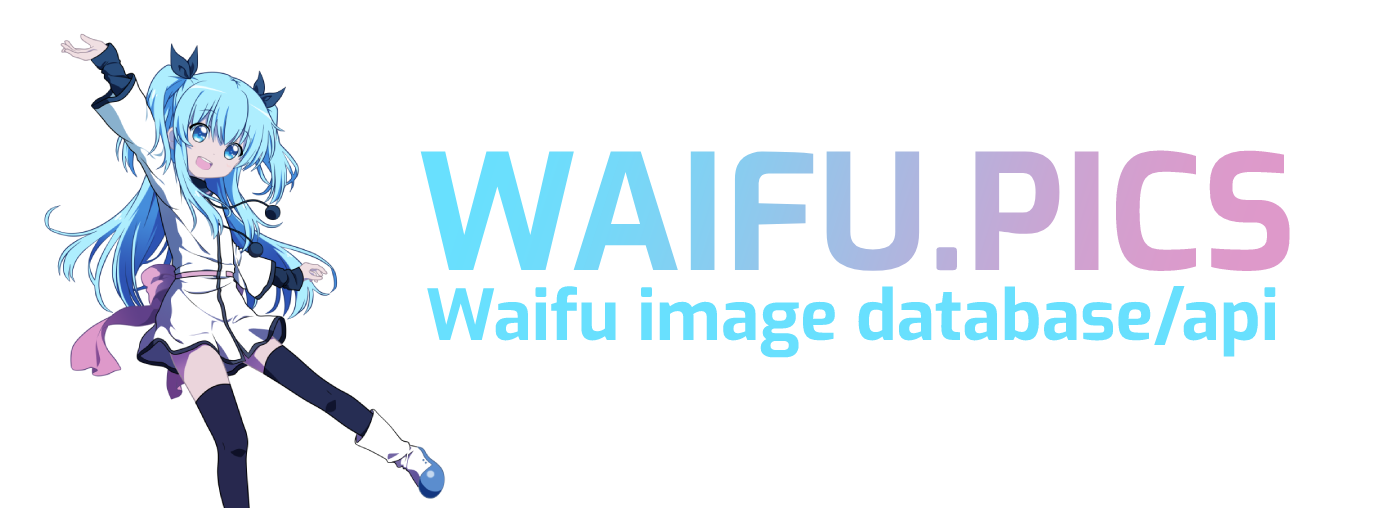
<style>
.page{position:relative;width:1373px;height:508px;background:#ffffff}
.page>*{position:absolute;margin:0}
.t1{font:160px "Exo-Bold"}
.t2{font:70px "Exo-Bold";color:#68e0fe}
</style>
<div class="page">
<p class="t1" style="left:420px;top:150px;width:870px;height:121px">WAIFU.PICS</p>
<p class="t2" style="left:427px;top:286px;width:849px;height:72px">Waifu image database/api</p>
</div>
